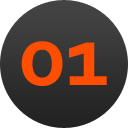
<style>
.page{position:relative;width:128px;height:128px;background:#ffffff}
.page>*{position:absolute;margin:0}
.t1{font:90px "Corbel-Bold";color:#ff4e00}
</style>
<div class="page">
<p class="t1" style="left:21px;top:41px;width:86px;height:45px">01</p>
</div>
